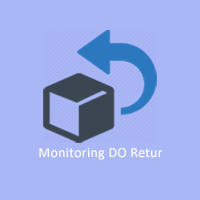
<style>
.page{position:relative;width:200px;height:200px;background:#aab7f7}
.page>*{position:absolute;margin:0}
.t1{font:14px "Calibri";letter-spacing:0.02em;color:#ffffff}
</style>
<div class="page">
<p class="t1" style="left:39px;top:148px;width:124px;height:12px">Monitoring DO Retur</p>
</div>
